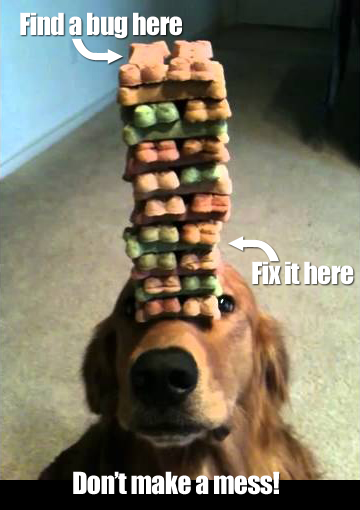
<style>
.page{position:relative;width:360px;height:510px}
.page>*{position:absolute;margin:0}
.t1{font:28px "Impact";letter-spacing:-0.025em;color:#ffffff}
</style>
<div class="page">
<p class="t1" style="left:20px;top:12px;width:162px;height:27px">Find a bug here</p>
<p class="t1" style="left:252px;top:261px;width:102px;height:24px">Fix it here</p>
<p class="t1" style="left:73px;top:471px;width:207px;height:24px">Don’t make a mess!</p>
</div>
